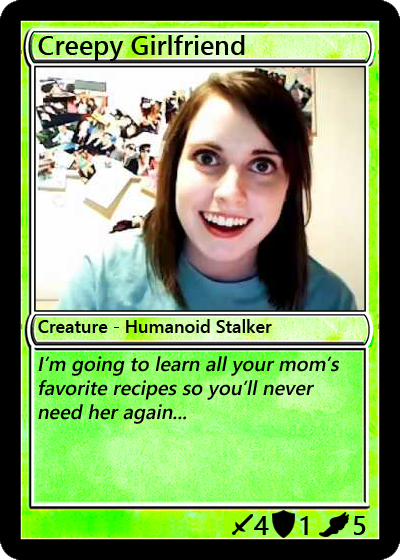
<style>
.page{position:relative;width:400px;height:560px}
.page>*{position:absolute;margin:0}
.t1{font:27px "YuGothicUI-Semibold";color:#000000}
.t2{font:18px "YuGothicUI-Semibold";color:#000000}
.t3{font:20px "YuGothicUI-Semibold";color:#000000;font-style:italic}
</style>
<div class="page">
<p class="t1" style="left:38px;top:35px;width:207px;height:26px">Creepy Girlfriend</p>
<p class="t2" style="left:38px;top:319px;width:234px;height:14px">Creature - Humanoid Stalker</p>
<p class="t3" style="left:38px;top:356px;width:301px;height:68px">I’m going to learn all your mom’s favorite recipes so you’ll never need her again...</p>
<p class="t1" style="left:254px;top:516px;width:15px;height:19px">4</p>
<p class="t1" style="left:300px;top:516px;width:8px;height:19px">1</p>
<p class="t1" style="left:354px;top:516px;width:12px;height:19px">5</p>
</div>
